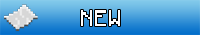
<style>
.page{position:relative;width:200px;height:35px}
.page>*{position:absolute;margin:0}
.t1{font:18px "Minecraft";color:#ffffff}
</style>
<div class="page">
<p class="t1" style="left:81px;top:10px;width:39px;height:16px">NEW</p>
</div>
